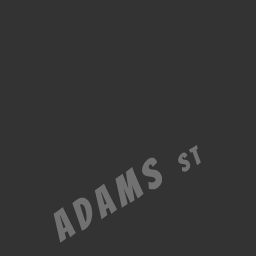
<style>
.page{position:relative;width:256px;height:256px;background:#333333}
.page>*{position:absolute;margin:0}
.t1{font:40px "Bangers-Regular";letter-spacing:0.16em;color:#717171}
.t2{font:24px "Bangers-Regular";letter-spacing:0.16em;color:#717171}
</style>
<div class="page">
<p class="t1" style="left:53px;top:145px;width:148px;height:98px;rotate:-30deg">ADAMS <span class="t2">ST</span></p>
</div>
